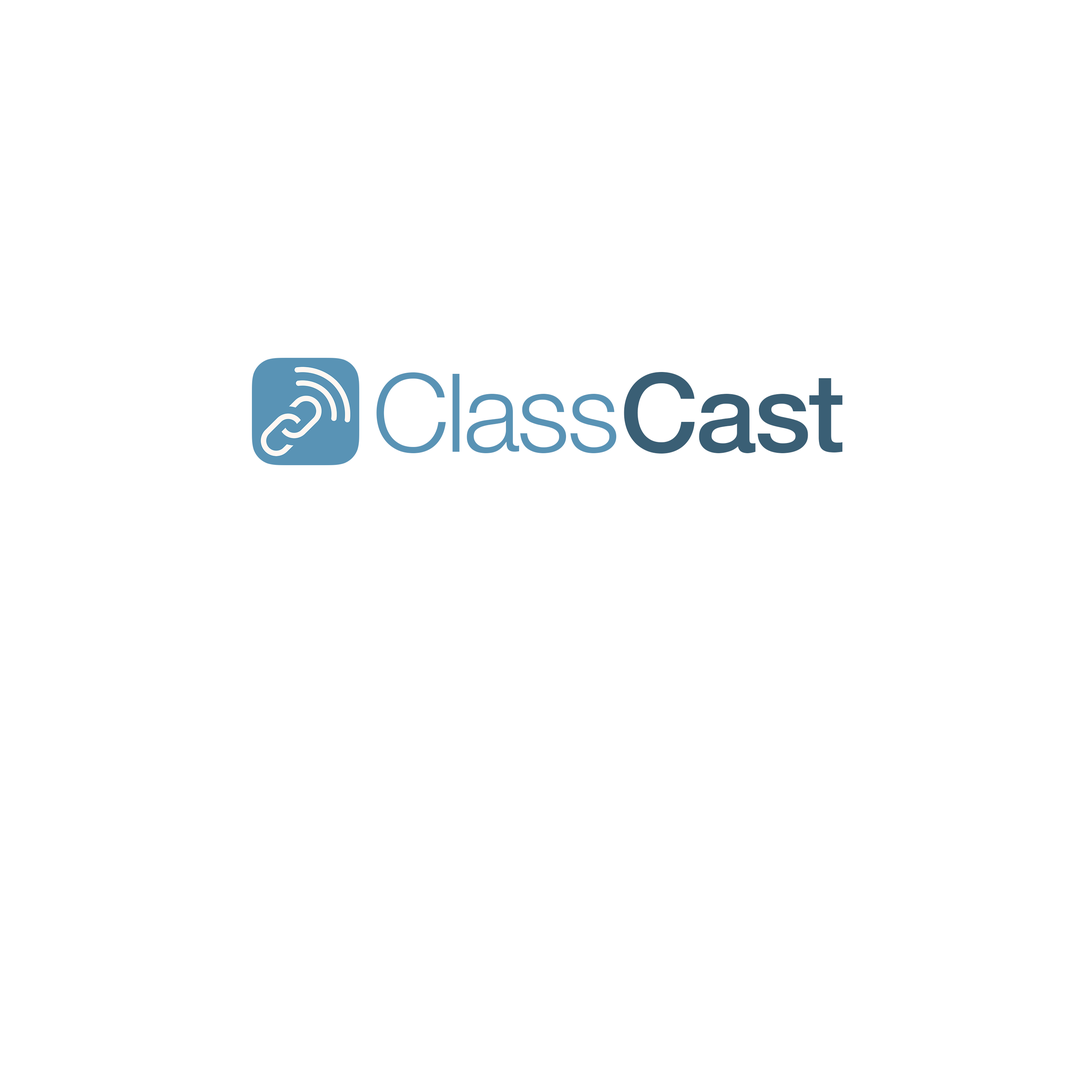
<style>
.page{position:relative;width:1092px;height:1092px;background:#ffffff}
.page>*{position:absolute;margin:0}
.t1{font:109.2px "HelveticaNeue-Light";letter-spacing:-0.01em;color:#5993b5}
.t2{font:109.2px "HelveticaNeue-Medium";letter-spacing:-0.01em;color:#3a5f75}
</style>
<div class="page">
<p class="t1" style="left:376px;top:372px;width:241px;height:81px">Class</p>
<p class="t2" style="left:624px;top:372px;width:219px;height:82px">Cast</p>
</div>
